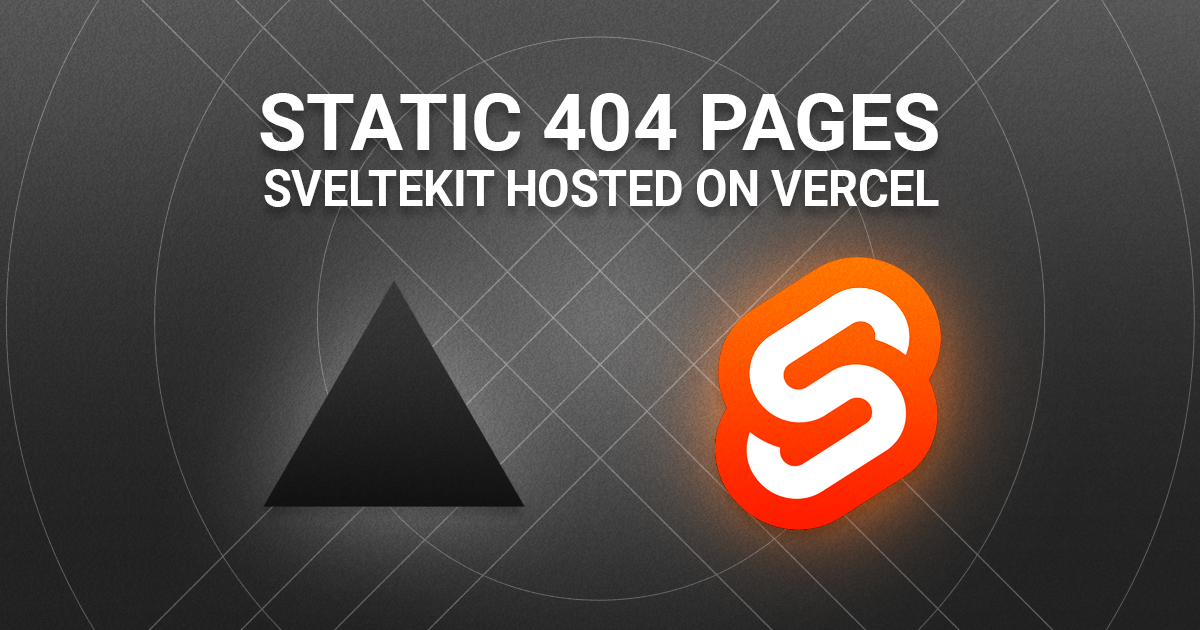
<style>
.page{position:relative;width:1200px;height:630px}
.page>*{position:absolute;margin:0}
.t1{font:78.9px "Roboto-Bold";color:#ffffff}
.t2{font:50.5px "Roboto-Bold";color:#ffffff;scale:0.92 1}
</style>
<div class="page">
<p class="t1" style="left:260px;top:93px;width:678px;height:58px">STATIC 404 PAGES</p>
<p class="t2" style="left:264px;top:169px;width:675px;height:38px">SVELTEKIT HOSTED ON VERCEL</p>
</div>
